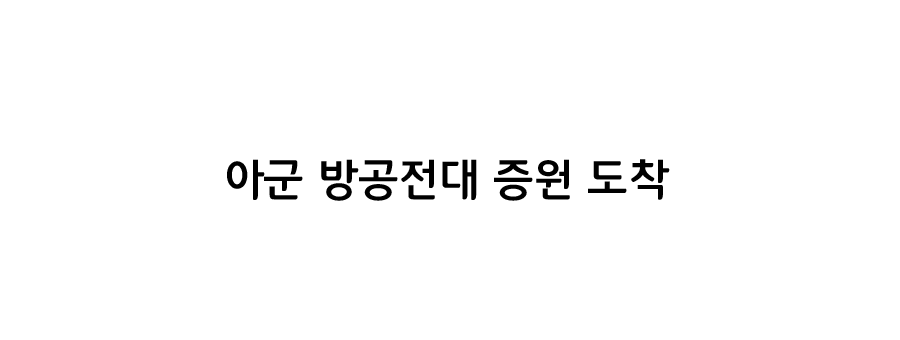
<style>
.page{position:relative;width:900px;height:340px;background:#ffffff}
.page>*{position:absolute;margin:0}
.t1{font:45px "12LotteMartDreamBold";color:#000000}
</style>
<div class="page">
<p class="t1" style="left:227px;top:159px;width:443px;height:42px">아군 방공전대 증원 도착</p>
</div>
